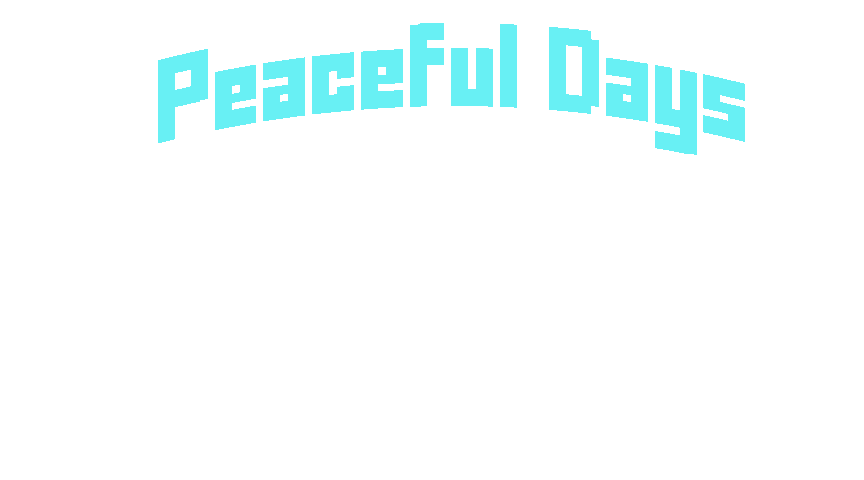
<style>
.page{position:relative;width:864px;height:480px;background:#ffffff}
.page>*{position:absolute;margin:0}
.t1{font:65px "FFFForward";color:#68f0f4}
</style>
<div class="page">
<p class="t1" style="left:158px;top:23px;width:587px;height:132px">Peaceful Days</p>
</div>
